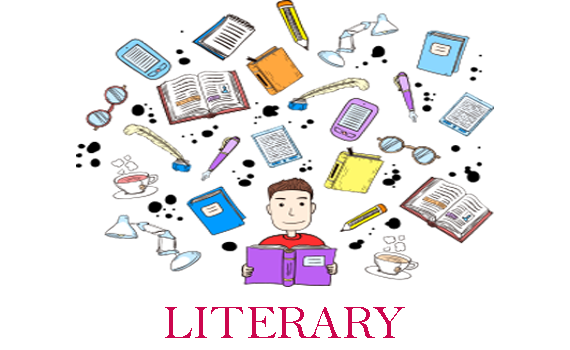
<style>
.page{position:relative;width:570px;height:350px;background:#ffffff}
.page>*{position:absolute;margin:0}
.t1{font:48px "BellMT";color:#cc064e}
</style>
<div class="page">
<p class="t1" style="left:165px;top:307px;width:240px;height:31px">LITERARY</p>
</div>
